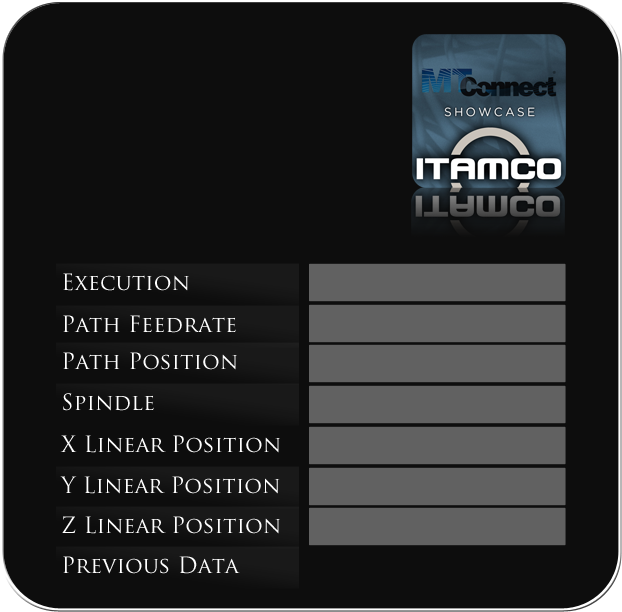
<style>
.page{position:relative;width:622px;height:612px;background:#0d0d0d}
.page>*{position:absolute;margin:0}
.t1{font:22px "TrajanPro-Regular";color:#ffffff}
</style>
<div class="page">
<p class="t1" style="left:63px;top:273px;width:126px;height:18px">Execution</p>
<p class="t1" style="left:63px;top:315px;width:173px;height:18px">Path Feedrate</p>
<p class="t1" style="left:63px;top:352px;width:174px;height:18px">Path Position</p>
<p class="t1" style="left:63px;top:393px;width:91px;height:18px">Spindle</p>
<p class="t1" style="left:60px;top:435px;width:220px;height:18px">X Linear Position</p>
<p class="t1" style="left:60px;top:476px;width:220px;height:18px">Y Linear Position</p>
<p class="t1" style="left:62px;top:516px;width:218px;height:18px">Z Linear Position</p>
<p class="t1" style="left:63px;top:556px;width:177px;height:18px">Previous Data</p>
</div>
